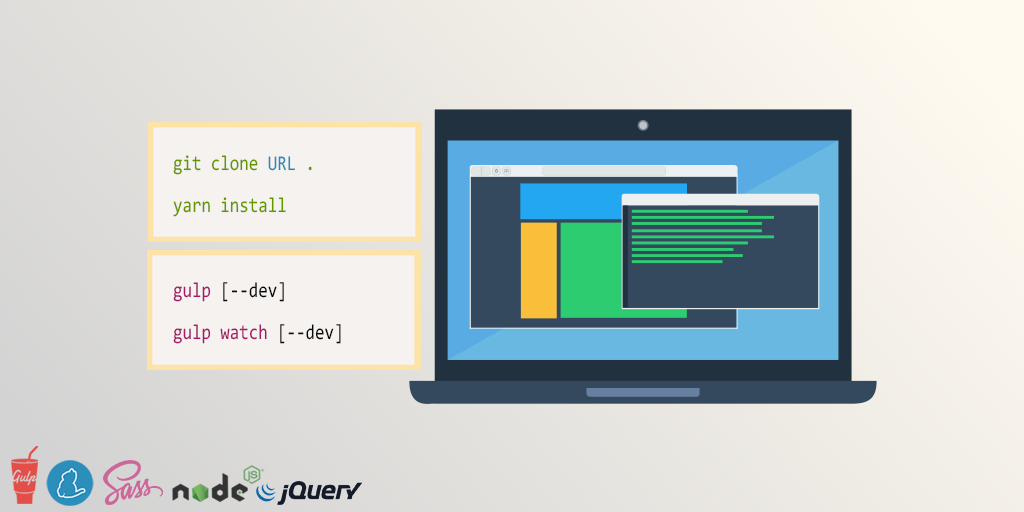
<style>
.page{position:relative;width:1024px;height:512px}
.page>*{position:absolute;margin:0}
.t1{font:21px/21px "Consolas";color:#629700;scale:0.82 1}
.t2{font:21px/21px "Consolas";color:#268bb6;scale:0.82 1}
.t3{font:21px/21px "Consolas";color:#a41b67;scale:0.82 1}
.t4{font:21px/21px "Consolas";color:#070707;scale:0.82 1}
</style>
<div class="page">
<p class="t1" style="left:173px;top:155px;width:139px;height:62px">git clone <span class="t2">URL </span>.<br><br>yarn install</p>
<p class="t3" style="left:173px;top:282px;width:168px;height:62px">gulp <span class="t4">[--dev]<br><br></span>gulp watch <span class="t4">[--dev]</span></p>
</div>
